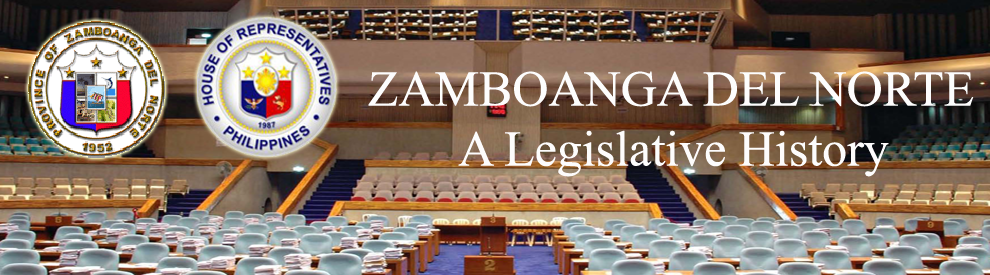
<style>
.page{position:relative;width:990px;height:275px}
.page>*{position:absolute;margin:0}
.t1{font:50px "TimesNewRomanPSMT";color:#fdfcfc}
.t2{font:50px "TimesNewRomanPSMT";color:#fdfdfd}
</style>
<div class="page">
<p class="t1" style="left:368px;top:71px;width:606px;height:106px;text-align:center"><span class="t2">ZAMBOANGA DEL NORTE<br></span>A Legislative History</p>
</div>
